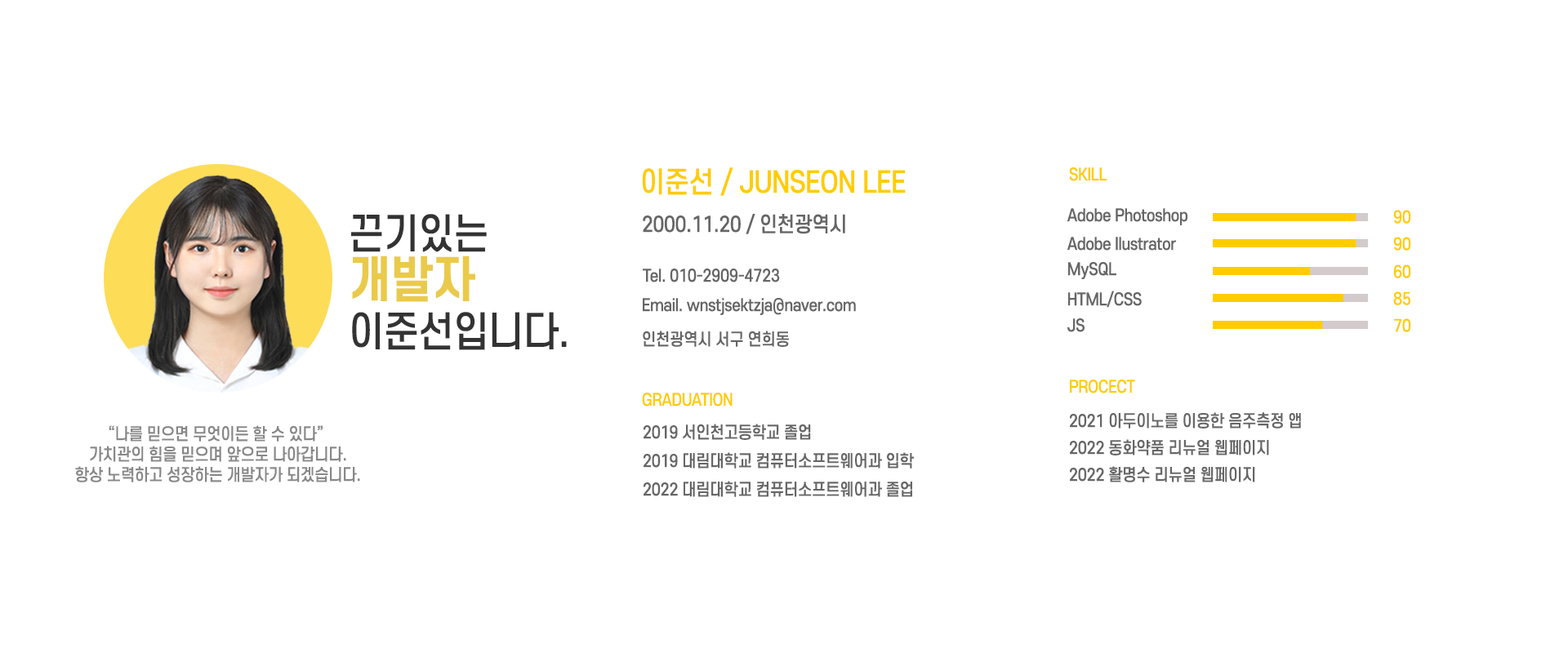
<style>
.page{position:relative;width:1568px;height:653px;background:#ffffff}
.page>*{position:absolute;margin:0}
.t1{font:28.6px "S-CoreDream-5Medium";letter-spacing:-0.02em;color:#ffcc00;scale:0.91 1}
.t2{font:16.3px "S-CoreDream-5Medium";letter-spacing:-0.02em;color:#ffcc00;scale:0.91 1}
.t3{font:16.3px "S-CoreDream-5Medium";letter-spacing:-0.02em;color:#666666;scale:0.91 1}
.t4{font:40.8px/49px "S-CoreDream-5Medium";letter-spacing:-0.02em;color:#333333;scale:0.91 1}
.t5{font:49px/49px "S-CoreDream-6Bold";letter-spacing:-0.02em;color:#eaca4a;scale:0.91 1}
.t6{font:20.4px "S-CoreDream-5Medium";letter-spacing:-0.02em;color:#666666;scale:0.91 1}
.t7{font:16.3px/20.4px "S-CoreDream-5Medium";letter-spacing:-0.02em;color:#888888;scale:0.91 1}
.t8{font:16.3px/28.6px "S-CoreDream-5Medium";letter-spacing:-0.02em;color:#666666;scale:0.91 1}
</style>
<div class="page">
<p class="t1" style="left:642px;top:167px;width:264px;height:29px">이준선 / JUNSEON LEE</p>
<p class="t2" style="left:1069px;top:167px;width:38px;height:14px">SKILL</p>
<p class="t3" style="left:1067px;top:208px;width:121px;height:17px">Adobe Photoshop</p>
<p class="t2" style="left:1393px;top:210px;width:18px;height:14px">90</p>
<p class="t4" style="left:351px;top:214px;width:216px;height:136px">끈기있는<br><span class="t5">개발자<br></span>이준선입니다.</p>
<p class="t6" style="left:643px;top:214px;width:202px;height:20px">2000.11.20 / 인천광역시</p>
<p class="t3" style="left:1067px;top:237px;width:110px;height:14px">Adobe Ilustrator</p>
<p class="t2" style="left:1393px;top:237px;width:18px;height:14px">90</p>
<p class="t3" style="left:643px;top:269px;width:137px;height:14px">Tel. 010-2909-4723</p>
<p class="t3" style="left:1068px;top:262px;width:48px;height:17px">MySQL</p>
<p class="t2" style="left:1394px;top:265px;width:17px;height:13px">60</p>
<p class="t3" style="left:1068px;top:291px;width:74px;height:17px">HTML/CSS</p>
<p class="t2" style="left:1393px;top:292px;width:17px;height:13px">85</p>
<p class="t3" style="left:643px;top:298px;width:213px;height:17px">Email. wnstjsektzja@naver.com</p>
<p class="t3" style="left:1067px;top:318px;width:18px;height:14px">JS</p>
<p class="t2" style="left:1394px;top:318px;width:17px;height:14px">70</p>
<p class="t3" style="left:643px;top:331px;width:146px;height:16px">인천광역시 서구 연희동</p>
<p class="t2" style="left:1070px;top:380px;width:65px;height:14px">PROCECT</p>
<p class="t2" style="left:642px;top:393px;width:91px;height:14px">GRADUATION</p>
<p class="t3" style="left:1070px;top:412px;width:231px;height:17px">2021 아두이노를 이용한 음주측정 앱</p>
<p class="t7" style="left:75px;top:425px;width:285px;height:58px;text-align:center">“나를 믿으면 무엇이든 할 수 있다” <br>가치관의 힘을 믿으며 앞으로 나아갑니다.<br>항상 노력하고 성장하는 개발자가 되겠습니다.</p>
<p class="t8" style="left:644px;top:424px;width:270px;height:73px">2019 서인천고등학교 졸업<br>2019 대림대학교 컴퓨터소프트웨어과 입학<br>2022 대림대학교 컴퓨터소프트웨어과 졸업</p>
<p class="t3" style="left:1070px;top:439px;width:199px;height:17px">2022 동화약품 리뉴얼 웹페이지</p>
<p class="t3" style="left:1070px;top:466px;width:185px;height:17px">2022 활명수 리뉴얼 웹페이지</p>
</div>
